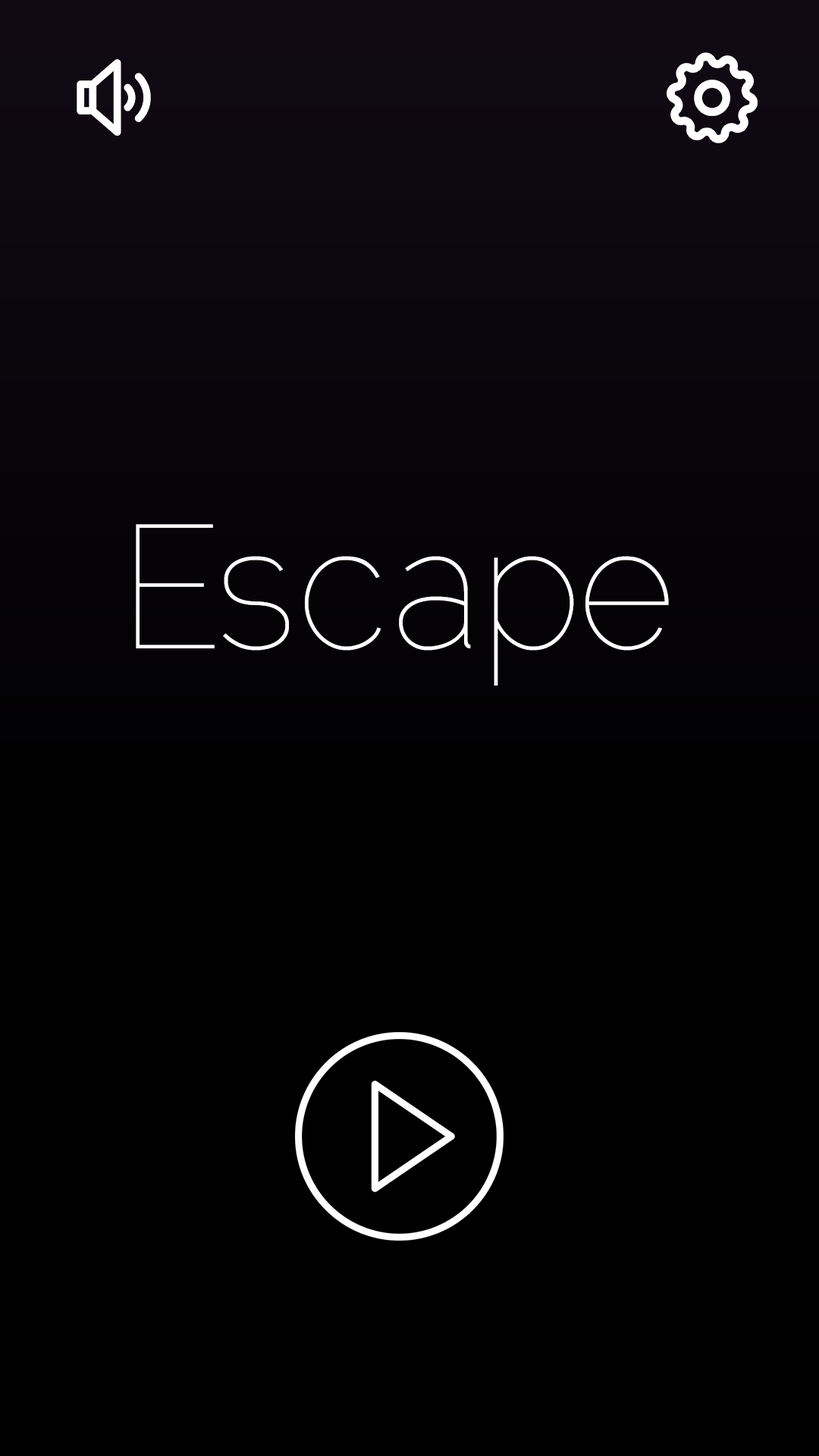
<style>
.page{position:relative;width:819px;height:1456px;background:#000000}
.page>*{position:absolute;margin:0}
.t1{font:174.6px "Raleway-Thin";color:#ffffff;scale:0.96 1}
</style>
<div class="page">
<p class="t1" style="left:136px;top:524px;width:533px;height:162px">Escape</p>
</div>
